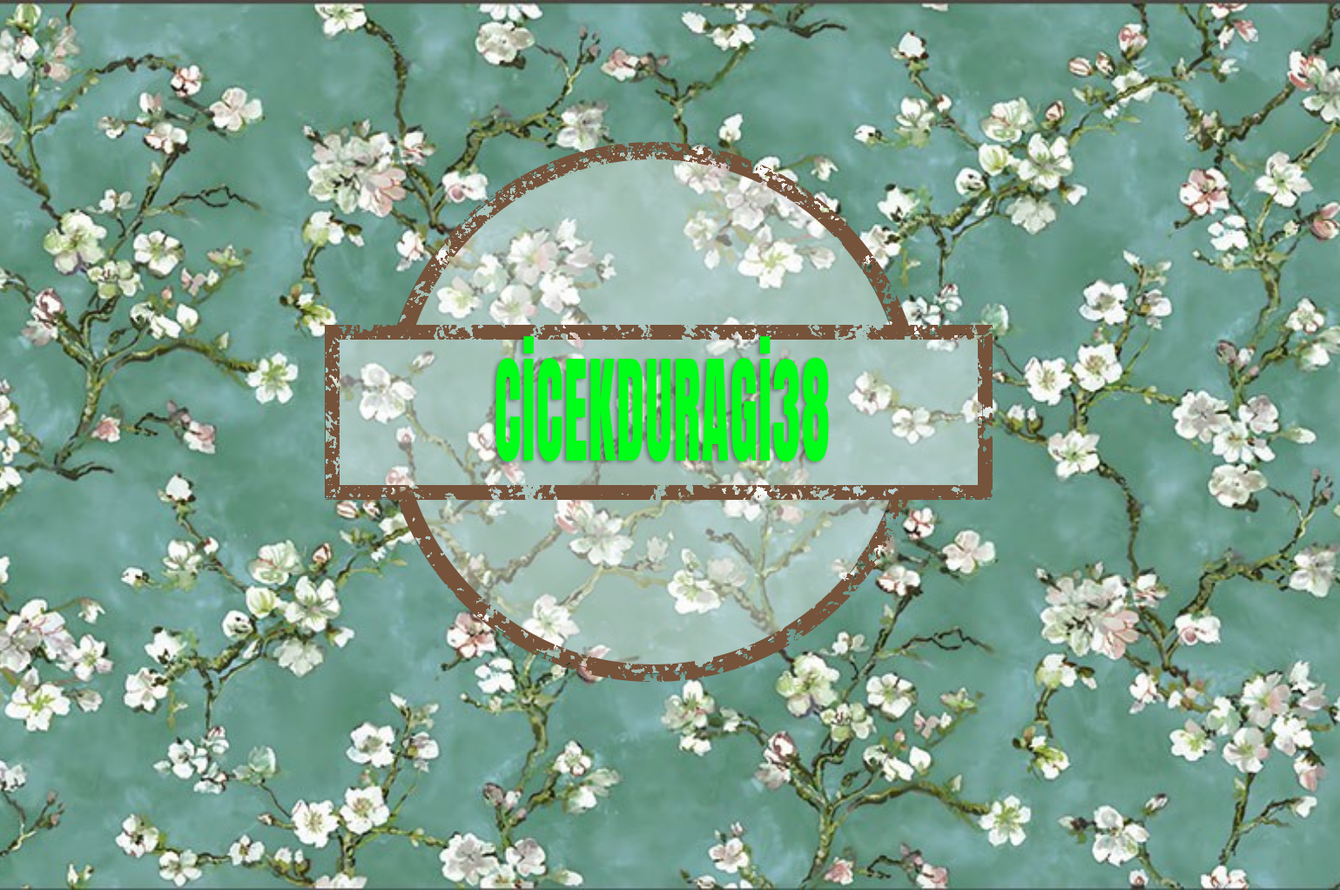
<style>
.page{position:relative;width:1340px;height:890px}
.page>*{position:absolute;margin:0}
.t1{font:118.3px "Impact";letter-spacing:0.02em;color:#00ff18;scale:0.48 1}
</style>
<div class="page">
<p class="t1" style="left:495px;top:336px;width:334px;height:126px">CİCEKDURAGİ38</p>
</div>
